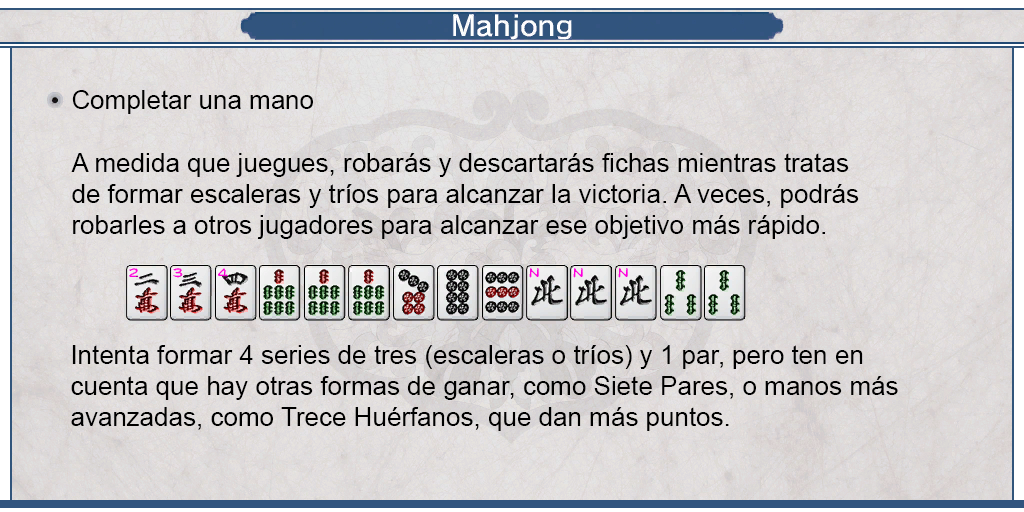
<style>
.page{position:relative;width:1024px;height:512px}
.page>*{position:absolute;margin:0}
.t1{font:26px "ArialMT";color:#000000}
</style>
<div class="page">
<p class="t1" style="left:72px;top:90px;width:241px;height:24px">Completar una mano</p>
<p class="t1" style="left:71px;top:153px;width:788px;height:86px;text-align:justify">A medida que juegues, robarás y descartarás fichas mientras tratas <br>de formar escaleras y tríos para alcanzar la victoria. A veces, podrás <br>robarles a otros jugadores para alcanzar ese objetivo más rápido.</p>
<p class="t1" style="left:71px;top:345px;width:827px;height:86px;text-align:justify">Intenta formar 4 series de tres (escaleras o tríos) y 1 par, pero ten en <br>cuenta que hay otras formas de ganar, como Siete Pares, o manos más <br>avanzadas, como Trece Huérfanos, que dan más puntos.</p>
</div>
